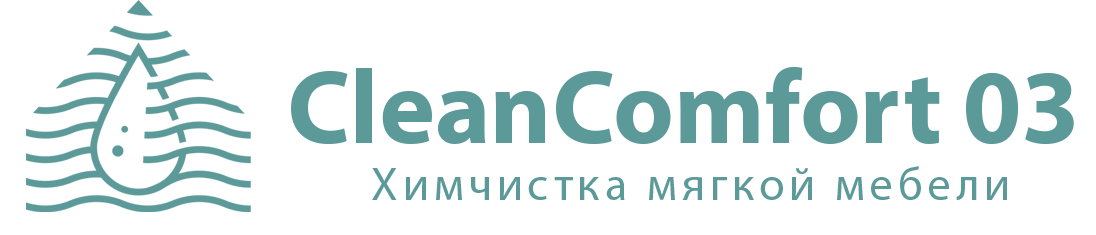
<style>
.page{position:relative;width:1096px;height:235px;background:#ffffff}
.page>*{position:absolute;margin:0}
.t1{font:105.5px "MyriadPro-Bold";color:#5c9999}
.t2{font:46.9px "MyriadPro-Regular";letter-spacing:0.1em;color:#5c9999}
</style>
<div class="page">
<p class="t1" style="left:291px;top:66px;width:783px;height:79px">CleanComfort 03</p>
<p class="t2" style="left:372px;top:166px;width:635px;height:34px">Химчистка мягкой мебели</p>
</div>
